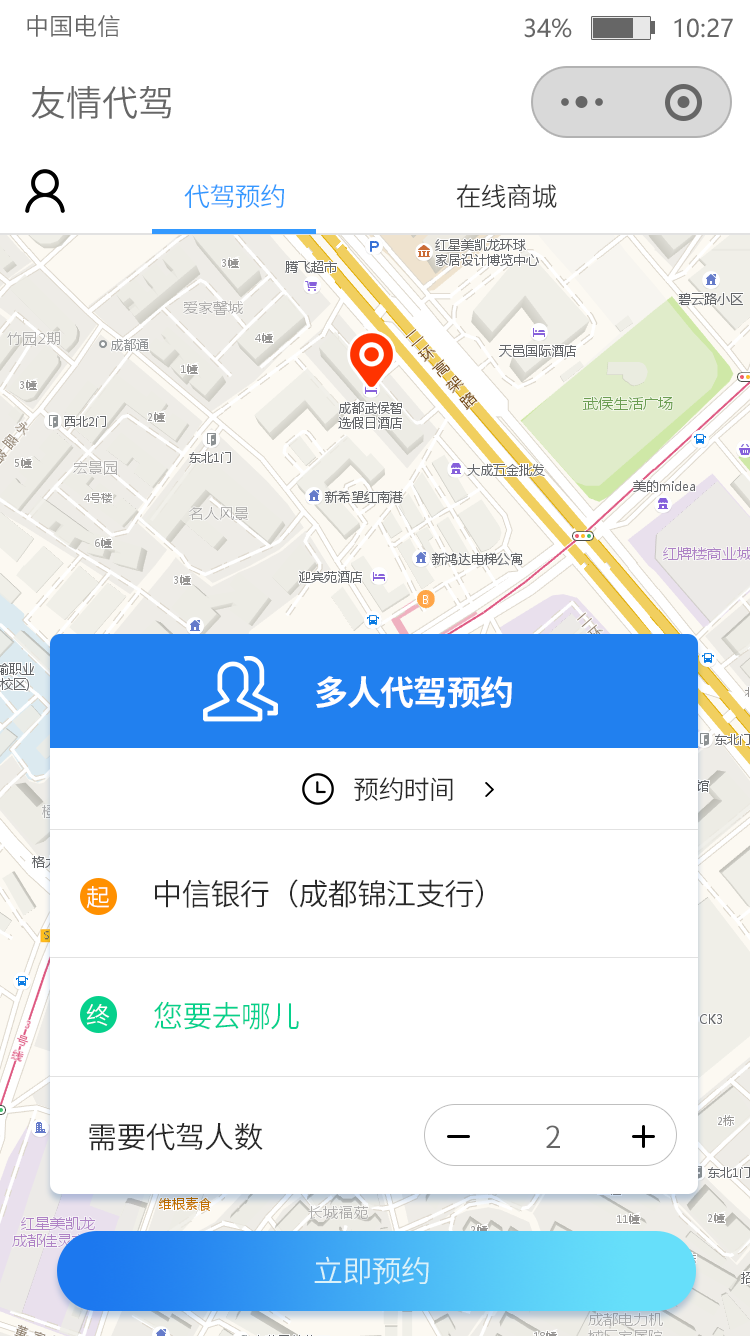
<style>
.page{position:relative;width:750px;height:1336px;background:#ffffff}
.page>*{position:absolute;margin:0}
.t1{font:24px "SourceHanSansCN-Normal";color:#666666}
.t2{font:24px "MicrosoftYaHei";color:#666666}
.t3{font:36px "SourceHanSansCN-Normal";color:#666666}
.t4{font:26px "SourceHanSansCN-Normal";letter-spacing:-0.025em;color:#3399ff}
.t5{font:26px "SourceHanSansCN-Normal";letter-spacing:-0.025em;color:#333333}
.t6{font:34px "SourceHanSansCN-Bold";letter-spacing:-0.025em;color:#ffffff}
.t7{font:26px "SourceHanSansCN-Normal";letter-spacing:-0.025em;color:#282828}
.t8{font:30px "SourceHanSansCN-Normal";letter-spacing:-0.025em;color:#282828}
.t9{font:24px "SourceHanSansCN-Normal";letter-spacing:-0.025em;color:#ffffff}
.t10{font:30px "SourceHanSansCN-Normal";letter-spacing:-0.025em;color:#06d18c}
.t11{font:30px "SourceHanSansCN-Normal";letter-spacing:-0.025em;color:#666666}
.t12{font:30px "SourceHanSansCN-Normal";letter-spacing:-0.025em;color:#daf2f9}
</style>
<div class="page">
<p class="t1" style="left:27px;top:15px;width:93px;height:22px">中国电信</p>
<p class="t2" style="left:524px;top:18px;width:209px;height:20px">34%              10:27</p>
<p class="t3" style="left:31px;top:86px;width:140px;height:33px">友情代驾</p>
<p class="t4" style="left:184px;top:184px;width:373px;height:24px">代驾预约<span class="t5">                                 在线商城</span></p>
<p class="t6" style="left:316px;top:676px;width:196px;height:33px">多人代驾预约</p>
<p class="t7" style="left:354px;top:777px;width:99px;height:24px">预约时间</p>
<p class="t8" style="left:155px;top:879px;width:328px;height:29px">中信银行（成都锦江支行）</p>
<p class="t9" style="left:86px;top:886px;width:23px;height:22px">起</p>
<p class="t10" style="left:154px;top:1001px;width:145px;height:29px">您要去哪儿</p>
<p class="t9" style="left:86px;top:1004px;width:24px;height:22px">终</p>
<p class="t8" style="left:89px;top:1123px;width:174px;height:28px">需要代驾人数</p>
<p class="t11" style="left:546px;top:1125px;width:14px;height:23px">2</p>
<p class="t12" style="left:314px;top:1256px;width:115px;height:29px">立即预约</p>
</div>
